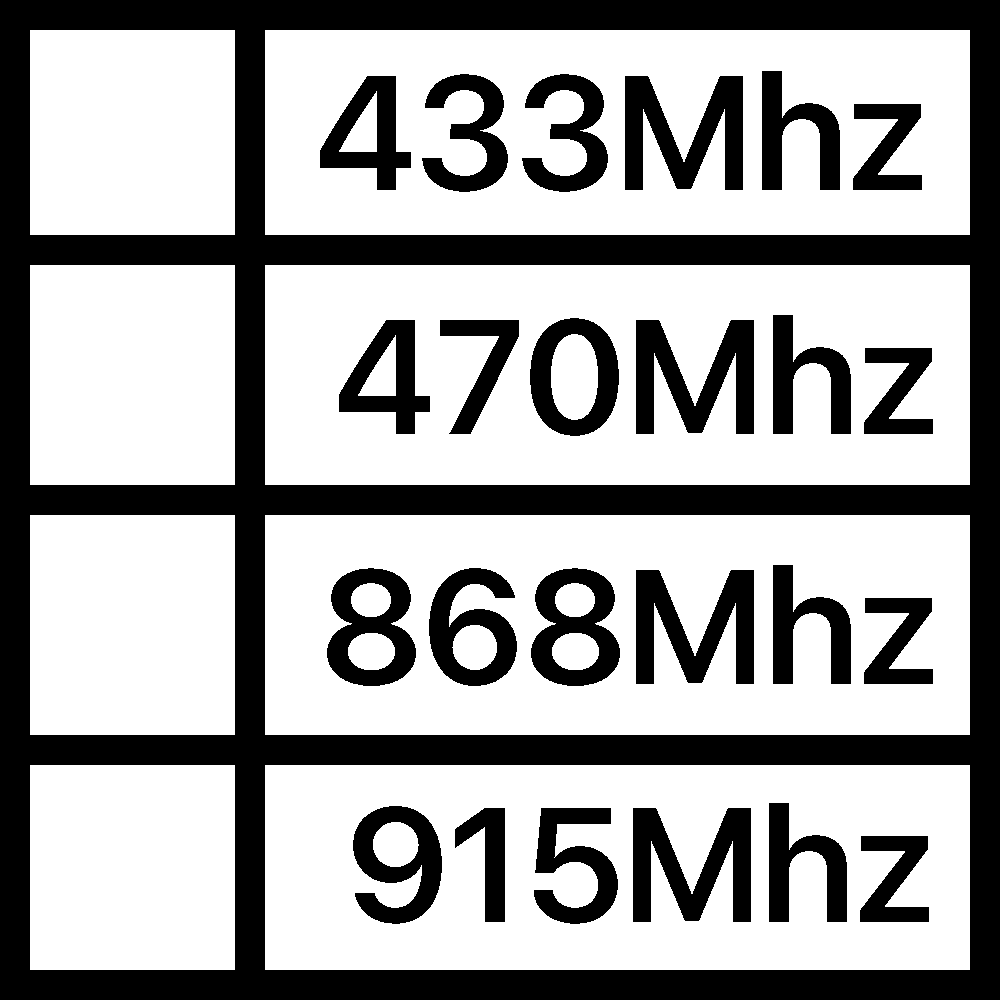
<style>
.page{position:relative;width:1000px;height:1000px;background:#ffffff}
.page>*{position:absolute;margin:0}
.t1{font:162px "SFUIDisplay-Semibold";color:#000000}
</style>
<div class="page">
<p class="t1" style="left:320px;top:71px;width:602px;height:121px">433Mhz</p>
<p class="t1" style="left:339px;top:315px;width:594px;height:121px">470Mhz</p>
<p class="t1" style="left:327px;top:565px;width:606px;height:121px">868Mhz</p>
<p class="t1" style="left:353px;top:803px;width:576px;height:121px">915Mhz</p>
</div>
